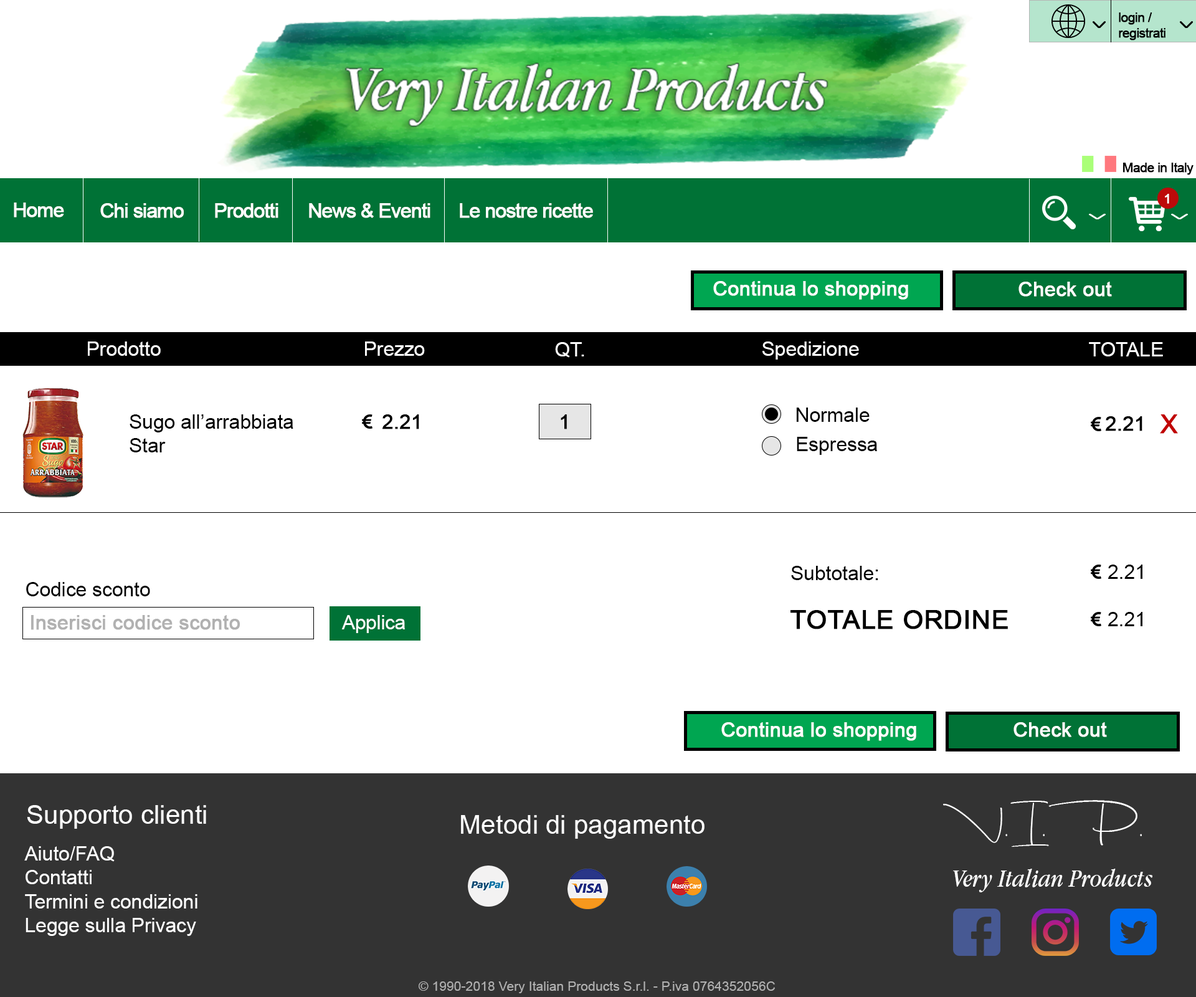
<style>
.page{position:relative;width:1196px;height:997px;background:#ffffff}
.page>*{position:absolute;margin:0}
.t1{font:13.2px "ArialMT";letter-spacing:-0.05em;color:#000000;font-weight:bold}
.t2{font:13.2px "ArialMT";letter-spacing:-0.05em;color:#ffffff;font-weight:bold}
.t3{font:19.8px "ArialMT";letter-spacing:-0.05em;color:#fffefe;font-weight:bold}
.t4{font:19.8px "ArialMT";color:#ffffff;font-weight:bold}
.t5{font:19.8px "ArialMT";color:#ffffff}
.t6{font:19.8px "ArialMT";color:#000000}
.t7{font:19.8px "ArialMT";color:#000000;font-weight:bold}
.t8{font:26.4px "ArialMT";color:#c10303;font-weight:bold}
.t9{font:19.8px "ArialMT";color:#b1b1b1;font-weight:bold}
.t10{font:19.8px "ArialMT";letter-spacing:-0.01em;color:#ffffff}
.t11{font:26.4px "ArialMT";color:#000000;font-weight:bold}
.t12{font:26.4px "ArialMT";color:#ffffff}
.t13{font:39.6px "DhanikansSignature2-Regular";color:#ffffff;text-transform:uppercase}
.t14{font:26.4px "AppleGaramond-Italic";color:#ffffff}
.t15{font:13.2px "ArialMT";color:#b1b1b1}
</style>
<div class="page">
<p class="t1" style="left:1119px;top:12px;width:47px;height:28px">login /<br>registrati</p>
<p class="t1" style="left:1123px;top:163px;width:71px;height:12px">Made in Italy</p>
<p class="t2" style="left:1165px;top:194px;width:4px;height:10px">1</p>
<p class="t3" style="left:14px;top:202px;width:50px;height:15px">Home</p>
<p class="t3" style="left:100px;top:203px;width:84px;height:15px">Chi siamo</p>
<p class="t3" style="left:215px;top:203px;width:63px;height:15px">Prodotti</p>
<p class="t3" style="left:309px;top:203px;width:122px;height:15px">News &amp; Eventi</p>
<p class="t3" style="left:460px;top:203px;width:133px;height:15px">Le nostre ricette</p>
<p class="t4" style="left:713px;top:281px;width:195px;height:19px">Continua lo shopping</p>
<p class="t4" style="left:1019px;top:282px;width:93px;height:15px">Check out</p>
<p class="t5" style="left:88px;top:341px;width:73px;height:15px">Prodotto</p>
<p class="t5" style="left:365px;top:341px;width:60px;height:15px">Prezzo</p>
<p class="t5" style="left:763px;top:341px;width:96px;height:18px">Spedizione</p>
<p class="t5" style="left:555px;top:342px;width:29px;height:16px">QT.</p>
<p class="t5" style="left:1089px;top:342px;width:74px;height:14px">TOTALE</p>
<p class="t6" style="left:796px;top:407px;width:74px;height:15px">Normale</p>
<p class="t6" style="left:130px;top:414px;width:163px;height:38px">Sugo all’arrabbiata<br>Star</p>
<p class="t7" style="left:383px;top:414px;width:36px;height:15px">2.21</p>
<p class="t7" style="left:561px;top:414px;width:6px;height:15px">1</p>
<p class="t7" style="left:1106px;top:416px;width:37px;height:15px">2.21</p>
<p class="t8" style="left:1160px;top:414px;width:18px;height:20px">X</p>
<p class="t6" style="left:797px;top:437px;width:80px;height:18px">Espressa</p>
<p class="t6" style="left:791px;top:566px;width:87px;height:14px">Subtotale:</p>
<p class="t6" style="left:1108px;top:564px;width:35px;height:15px">2.21</p>
<p class="t6" style="left:26px;top:582px;width:124px;height:14px">Codice sconto</p>
<p class="t9" style="left:31px;top:615px;width:209px;height:15px">Inserisci codice sconto</p>
<p class="t10" style="left:341px;top:615px;width:64px;height:18px">Applica</p>
<p class="t11" style="left:791px;top:610px;width:217px;height:19px">TOTALE ORDINE</p>
<p class="t6" style="left:1108px;top:612px;width:35px;height:14px">2.21</p>
<p class="t4" style="left:721px;top:722px;width:195px;height:19px">Continua lo shopping</p>
<p class="t4" style="left:1014px;top:722px;width:93px;height:15px">Check out</p>
<p class="t12" style="left:27px;top:805px;width:179px;height:24px">Supporto clienti</p>
<p class="t13" style="left:943px;top:800px;width:199px;height:47px">v.i.p.</p>
<p class="t12" style="left:461px;top:815px;width:244px;height:24px">Metodi di pagamento</p>
<p class="t5" style="left:24px;top:846px;width:173px;height:90px">Aiuto/FAQ<br>Contatti<br>Termini e condizioni <br>Legge sulla Privacy</p>
<p class="t14" style="left:953px;top:868px;width:200px;height:24px">Very Italian Products</p>
<p class="t15" style="left:418px;top:981px;width:357px;height:12px">© 1990-2018 Very Italian Products S.r.l. - P.iva 0764352056C</p>
</div>
